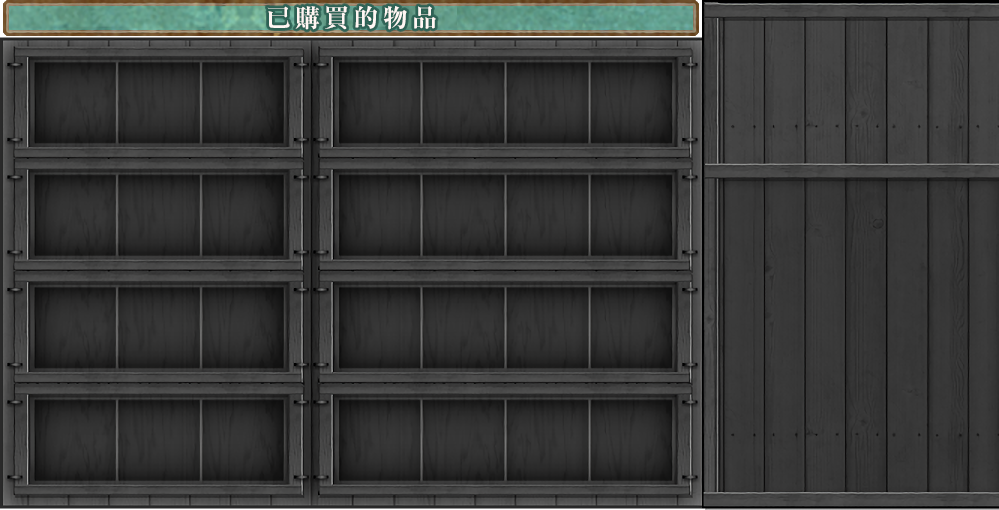
<style>
.page{position:relative;width:999px;height:510px}
.page>*{position:absolute;margin:0}
.t1{font:25px "RyuminPr6N-ExBold";letter-spacing:0.2em;color:#fff6f3}
</style>
<div class="page">
<p class="t1" style="left:267px;top:5px;width:169px;height:25px">已購買的物品</p>
</div>
